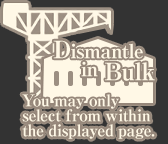
<style>
.page{position:relative;width:168px;height:144px;background:#333333}
.page>*{position:absolute;margin:0}
.t1{font:19.6px/18px "RyuminPro-ExBold";letter-spacing:-0.04em;color:#fff8e6}
.t2{font:24px/18px "RyuminPro-ExBold";letter-spacing:-0.04em;color:#fff8e6}
.t3{font:16px/15px "RyuminPro-ExBold";letter-spacing:-0.04em;color:#fff8e6}
</style>
<div class="page">
<p class="t1" style="left:53px;top:40px;width:102px;height:41px"><span class="t2">D</span>ismantle<br>    in <span class="t2">Bulk</span></p>
<p class="t3" style="left:22px;top:94px;width:133px;height:45px">You may only<br>select from within<br>the displayed page.</p>
</div>
